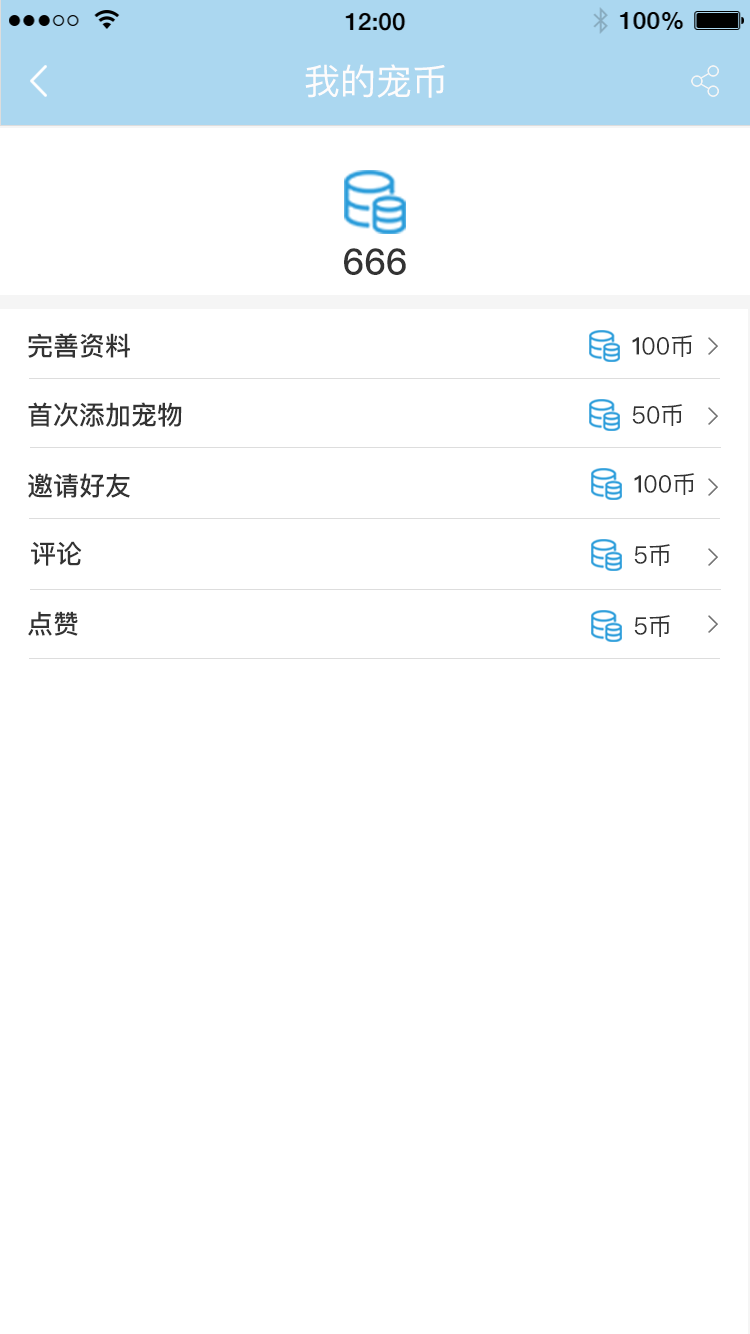
<style>
.page{position:relative;width:750px;height:1334px;background:#ffffff}
.page>*{position:absolute;margin:0}
.t1{font:36px "PingFangSC-Regular";color:#fefcfc}
.t2{font:36px "PingFangSC-Medium";color:#333333}
.t3{font:26px "PingFangSC-Medium";color:#333333}
.t4{font:24px "PingFangSC-Regular";color:#333333}
.t5{font:24px "PingFangSC-Medium";color:#333333}
</style>
<div class="page">
<p class="t1" style="left:305px;top:64px;width:140px;height:34px">我的宠币</p>
<p class="t2" style="left:344px;top:248px;width:62px;height:27px">666</p>
<p class="t3" style="left:28px;top:333px;width:102px;height:25px">完善资料</p>
<p class="t4" style="left:632px;top:335px;width:61px;height:22px"><span class="t5">1</span>00币</p>
<p class="t3" style="left:28px;top:402px;width:154px;height:25px">首次添加宠物</p>
<p class="t4" style="left:632px;top:404px;width:51px;height:22px">50币</p>
<p class="t3" style="left:28px;top:473px;width:102px;height:25px">邀请好友</p>
<p class="t4" style="left:634px;top:473px;width:61px;height:22px"><span class="t5">1</span>00币</p>
<p class="t3" style="left:31px;top:541px;width:51px;height:25px">评论</p>
<p class="t4" style="left:634px;top:544px;width:36px;height:22px">5币</p>
<p class="t3" style="left:28px;top:611px;width:50px;height:25px">点赞</p>
<p class="t4" style="left:634px;top:615px;width:36px;height:22px">5币</p>
</div>
